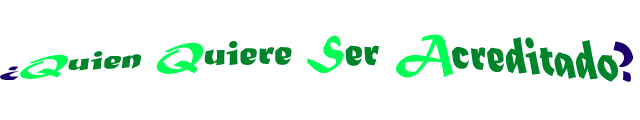
<style>
.page{position:relative;width:640px;height:120px;background:#ffffff}
.page>*{position:absolute;margin:0}
.t1{font:43px "MaturaMTScriptCapitals";color:#00842b}
.t2{font:43px "MaturaMTScriptCapitals";color:#1a006f}
.t3{font:43px "MaturaMTScriptCapitals";color:#00ff54}
</style>
<div class="page">
<p class="t1" style="left:0px;top:34px;width:634px;height:48px"><span class="t2">¿</span><span class="t3">Q</span>uien <span class="t3">Q</span>uiere <span class="t3">S</span>er <span class="t3">A</span>creditado<span class="t2">?</span></p>
</div>
